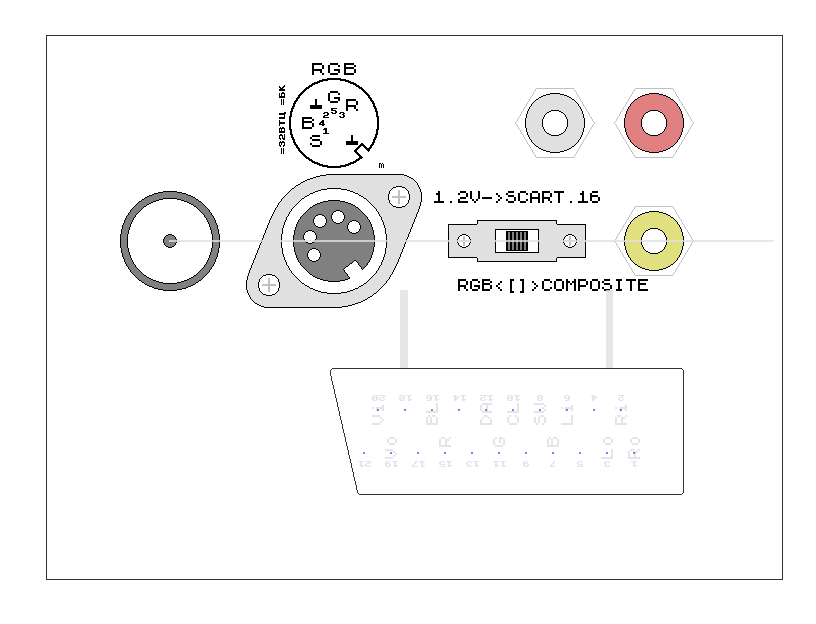
<style>
.page{position:relative;width:816px;height:624px;background:#ffffff}
.page>*{position:absolute;margin:0}
.t1{font:16px "ZX 6x8";color:#000000}
.t2{font:16px/27px "ZX 6x8";color:#e5e5e5}
</style>
<div class="page">
<p class="t1" style="left:434px;top:191px;width:166px;height:12px">1.2V-&gt;SCART.16</p>
<p class="t1" style="left:458px;top:279px;width:190px;height:14px">RGB&lt;[]&gt;COMPOSITE</p>
<p class="t2" style="left:372px;top:403px;width:255px;height:22px;rotate:-90deg">Vi<br><br>BL<br><br>DA<br>CL<br>SW<br>Li<br><br>Ri</p>
<p class="t2" style="left:385px;top:437px;width:255px;height:22px;rotate:-90deg">Vo<br><br> R<br><br> G<br><br> B<br><br>Lo<br>Ro</p>
</div>
